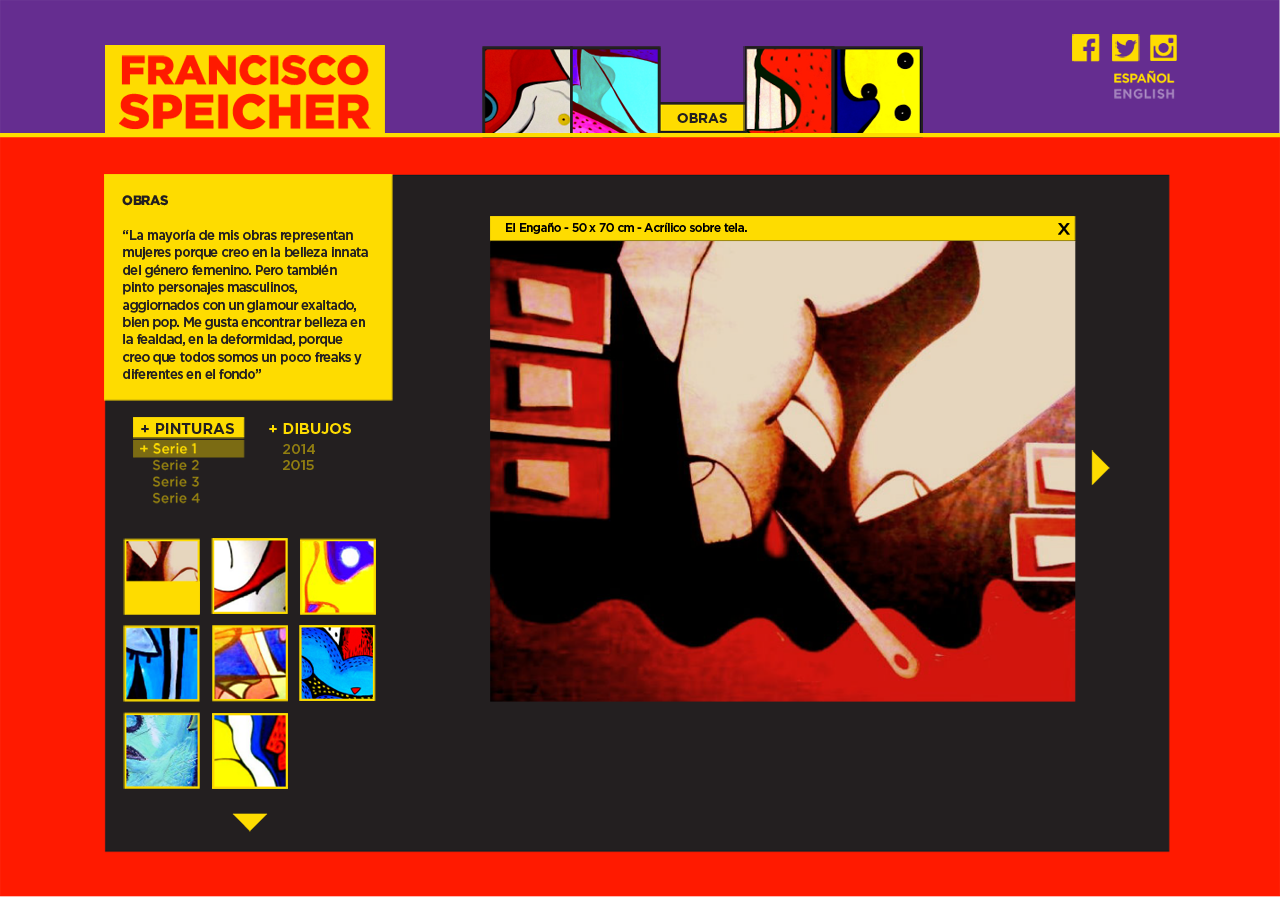
<style>
.page{position:relative;width:1280px;height:897px;background:#231f20}
.page>*{position:absolute;margin:0}
.t1{font:13.7px "GothamBold";color:#231f20}
.t2{font:13.7px/17.4px "GothamMedium";letter-spacing:-0.036em;color:#231f20;scale:0.95 1}
.t3{font:13.7px/17.4px "Gotham-Black";letter-spacing:-0.036em;color:#231f20;scale:0.95 1}
.t4{font:12.4px "GothamMedium";letter-spacing:-0.036em;color:#000000;scale:0.95 1}
.t5{font:14.9px "GothamBold";color:#231f20}
.t6{font:14.9px "GothamBold";color:#fedc00}
.t7{font:13.7px "GothamMedium";color:#917e10}
</style>
<div class="page">
<p class="t1" style="left:677px;top:113px;width:51px;height:10px">OBRAS</p>
<p class="t1" style="left:677px;top:113px;width:50px;height:10px">OBRAS</p>
<p class="t2" style="left:122px;top:195px;width:246px;height:184px"><span class="t3">OBRAS<br></span><br>“La mayoría de mis obras representan mujeres porque creo en la belleza innata del género femenino. Pero también pinto personajes masculinos, aggiornados con un glamour exaltado, bien pop. Me gusta encontrar belleza en la fealdad, en la deformidad, porque creo que todos somos un poco freaks y diferentes en el fondo”</p>
<p class="t4" style="left:506px;top:222px;width:241px;height:12px">El Engaño - 50 x 70 cm - Acrílico sobre tela.</p>
<p class="t5" style="left:141px;top:423px;width:93px;height:11px">+ PINTURAS</p>
<p class="t6" style="left:269px;top:423px;width:82px;height:11px">+ DIBUJOS</p>
<p class="t7" style="left:271px;top:444px;width:44px;height:26px">+ 2014<br>   2015</p>
</div>
